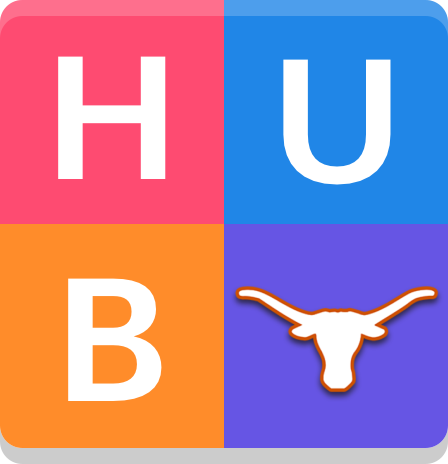
<style>
.page{position:relative;width:448px;height:464px;background:#ff8c2a}
.page>*{position:absolute;margin:0}
.t1{font:180px "MartelSans-Bold";color:#ffffff}
</style>
<div class="page">
<p class="t1" style="left:58px;top:56px;width:108px;height:123px">H</p>
<p class="t1" style="left:283px;top:59px;width:108px;height:126px">U</p>
<p class="t1" style="left:68px;top:278px;width:94px;height:123px">B</p>
</div>
